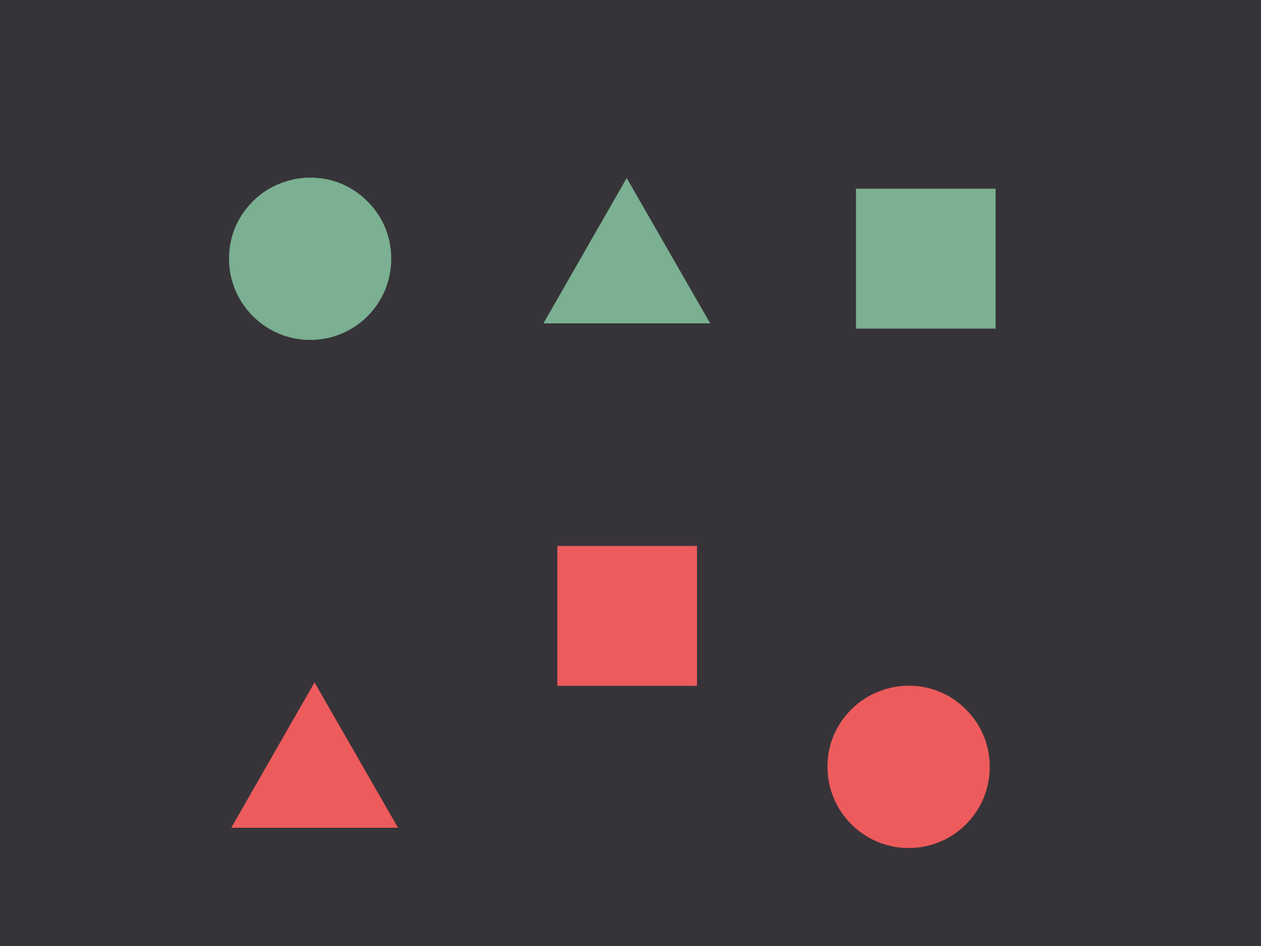
<style>
.page{position:relative;width:1261px;height:946px;background:#363439}
.page>*{position:absolute;margin:0}
.t1{font:184.7px "HiraKakuStdN-W8";color:#7bb092}
.t2{font:184.7px "HiraKakuStdN-W8";color:#ee5b5c}
</style>
<div class="page">
<p class="t1" style="left:229px;top:177px;width:163px;height:163px">●</p>
<p class="t1" style="left:543px;top:178px;width:167px;height:145px">▲</p>
<p class="t1" style="left:856px;top:188px;width:140px;height:141px">■</p>
<p class="t2" style="left:557px;top:545px;width:140px;height:141px">■</p>
<p class="t2" style="left:231px;top:682px;width:167px;height:145px">▲</p>
<p class="t2" style="left:827px;top:685px;width:163px;height:163px">●</p>
</div>
